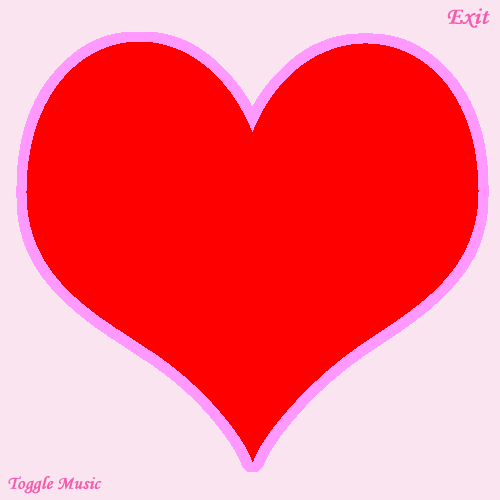
<style>
.page{position:relative;width:500px;height:500px;background:#ff0000}
.page>*{position:absolute;margin:0}
.t1{font:24px "MonotypeCorsiva";color:#f55cad;font-weight:bold;scale:1.03 1}
.t2{font:18px "MonotypeCorsiva";color:#f55cad;font-weight:bold;scale:1.03 1}
</style>
<div class="page">
<p class="t1" style="left:447px;top:8px;width:43px;height:20px">Exit</p>
<p class="t2" style="left:8px;top:476px;width:94px;height:18px">Toggle Music</p>
</div>
